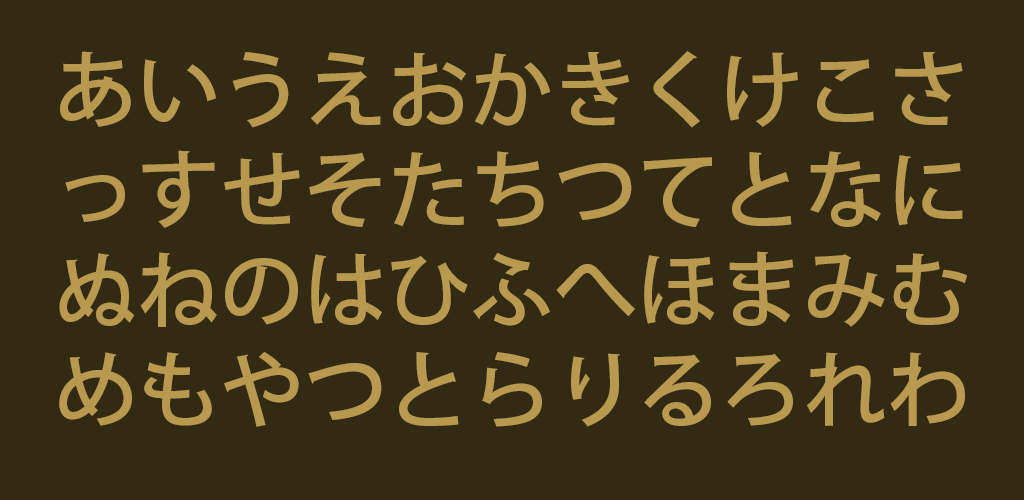
<style>
.page{position:relative;width:1024px;height:500px;background:#332a14}
.page>*{position:absolute;margin:0}
.t1{font:83.3px "AdobeHeitiStd-Regular";color:#b9994f}
</style>
<div class="page">
<p class="t1" style="left:59px;top:51px;width:908px;height:376px;text-align:center">あいうえおかきくけこさっすせそたちつてとなにぬねのはひふへほまみむめもやつとらりるろれわゐゑをん</p>
</div>
